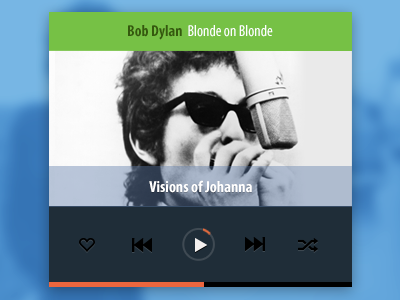
<style>
.page{position:relative;width:400px;height:300px}
.page>*{position:absolute;margin:0}
.t1{font:16px "MyriadPro-Cond";color:#ffffff}
.t2{font:16px "MyriadPro-BoldCond";color:#35590e}
.t3{font:16px "MyriadPro-BoldCond";color:#ffffff}
</style>
<div class="page">
<p class="t1" style="left:128px;top:25px;width:145px;height:15px"><span class="t2">Bob Dylan  </span>Blonde on Blonde</p>
<p class="t3" style="left:149px;top:180px;width:103px;height:13px">Visions of Johanna</p>
</div>
